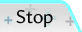
<style>
.page{position:relative;width:82px;height:32px}
.page>*{position:absolute;margin:0}
.t1{font:18.7px "Amira-Roman";color:#000000}
</style>
<div class="page">
<p class="t1" style="left:16px;top:10px;width:37px;height:18px;opacity:0.96">Stop</p>
</div>
